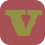
<style>
.page{position:relative;width:45px;height:45px;background:#a75157}
.page>*{position:absolute;margin:0}
.t1{font:50px "Saddlebag-Black";color:#949146}
</style>
<div class="page">
<p class="t1" style="left:5px;top:10px;width:38px;height:26px">V</p>
</div>
